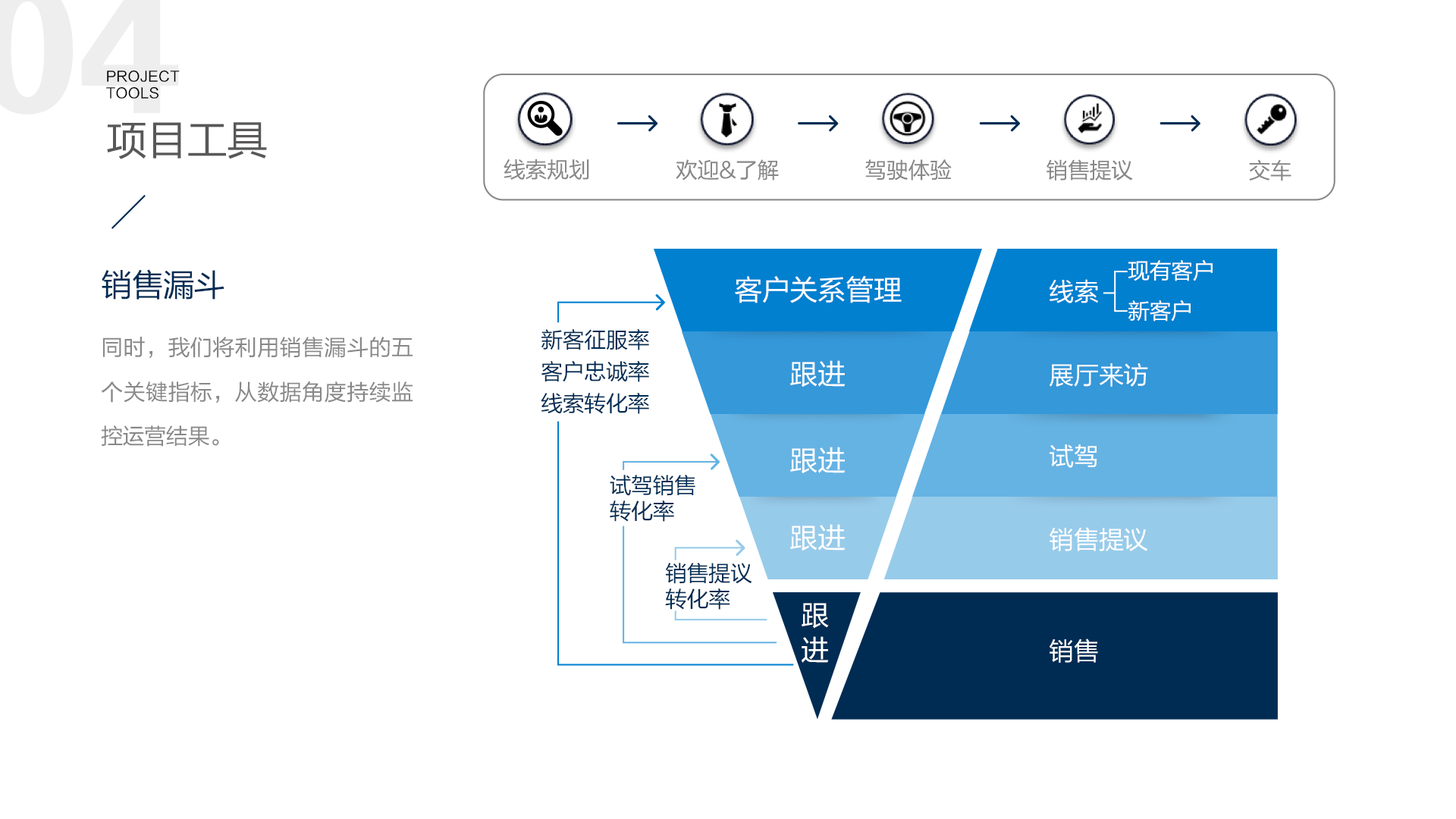
<style>
.page{position:relative;width:1456px;height:819px;background:#ffffff}
.page>*{position:absolute;margin:0}
.t1{font:14.1px "FZLTHJW--GB1-0";letter-spacing:0.02em;color:#000000}
.t2{font:41.1px "FZLTHJW--GB1-0";letter-spacing:-0.02em;color:#595757}
.t3{font:31.6px "FZLTHJW--GB1-0";letter-spacing:-0.02em;color:#002c54}
.t4{font:22.1px "FZLTHJW--GB1-0";letter-spacing:-0.02em;color:#ffffff}
.t5{font:28.4px "FZLTHJW--GB1-0";letter-spacing:-0.02em;color:#ffffff}
.t6{font:25.3px "FZLTHJW--GB1-0";letter-spacing:-0.02em;color:#ffffff}
.t7{font:22.1px/31.6px "FZLTHJW--GB1-0";letter-spacing:-0.02em;color:#002c54}
.t8{font:22.1px/44.2px "FZLTHJW--GB1-0";letter-spacing:-0.02em;color:#888888}
.t9{font:22.1px/25.3px "FZLTHJW--GB1-0";letter-spacing:-0.02em;color:#002c54}
.t10{font:28.4px/34.8px "FZLTHJW--GB1-0";letter-spacing:-0.02em;color:#ffffff}
</style>
<div class="page">
<p class="t1" style="left:106px;top:70px;width:74px;height:29px">PROJECT <br>TOOLS</p>
<p class="t2" style="left:107px;top:122px;width:160px;height:37px">项目工具</p>
<p class="t3" style="left:102px;top:269px;width:122px;height:31px">销售漏斗</p>
<p class="t4" style="left:1128px;top:259px;width:85px;height:22px">现有客户</p>
<p class="t5" style="left:735px;top:276px;width:167px;height:27px">客户关系管理</p>
<p class="t6" style="left:1050px;top:279px;width:48px;height:24px">线索</p>
<p class="t4" style="left:1128px;top:300px;width:63px;height:22px">新客户</p>
<p class="t7" style="left:541px;top:329px;width:108px;height:85px">新客征服率<br>客户忠诚率<br>线索转化率</p>
<p class="t8" style="left:101px;top:337px;width:312px;height:110px;text-align:justify">同时，我们将利用销售漏斗的五个关键指标，从数据角度持续监控运营结果。</p>
<p class="t5" style="left:790px;top:360px;width:56px;height:28px">跟进</p>
<p class="t6" style="left:1050px;top:363px;width:98px;height:24px">展厅来访</p>
<p class="t5" style="left:790px;top:447px;width:56px;height:27px">跟进</p>
<p class="t6" style="left:1050px;top:444px;width:47px;height:24px">试驾</p>
<p class="t9" style="left:610px;top:475px;width:85px;height:47px">试驾销售<br>转化率</p>
<p class="t5" style="left:790px;top:524px;width:56px;height:27px">跟进</p>
<p class="t6" style="left:1050px;top:527px;width:98px;height:24px">销售提议</p>
<p class="t9" style="left:665px;top:563px;width:87px;height:47px">销售提议<br>转化率</p>
<p class="t10" style="left:802px;top:603px;width:27px;height:60px">跟<br>进</p>
<p class="t6" style="left:1050px;top:639px;width:48px;height:24px">销售</p>
</div>
